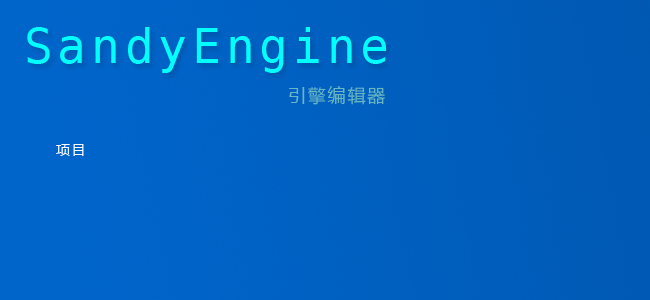
<style>
.page{position:relative;width:650px;height:300px}
.page>*{position:absolute;margin:0}
.t1{font:48px "BitstreamVeraSansMono-Roman";letter-spacing:0.1em;color:#00ffff}
.t2{font:18px "MicrosoftYaHei";letter-spacing:0.1em;color:#69b7c0}
.t3{font:14px "MicrosoftYaHei";letter-spacing:0.1em;color:#ffffff}
</style>
<div class="page">
<p class="t1" style="left:27px;top:27px;width:360px;height:46px">SandyEngine</p>
<p class="t2" style="left:289px;top:86px;width:96px;height:19px">引擎编辑器</p>
<p class="t3" style="left:56px;top:144px;width:28px;height:12px">项目</p>
</div>
